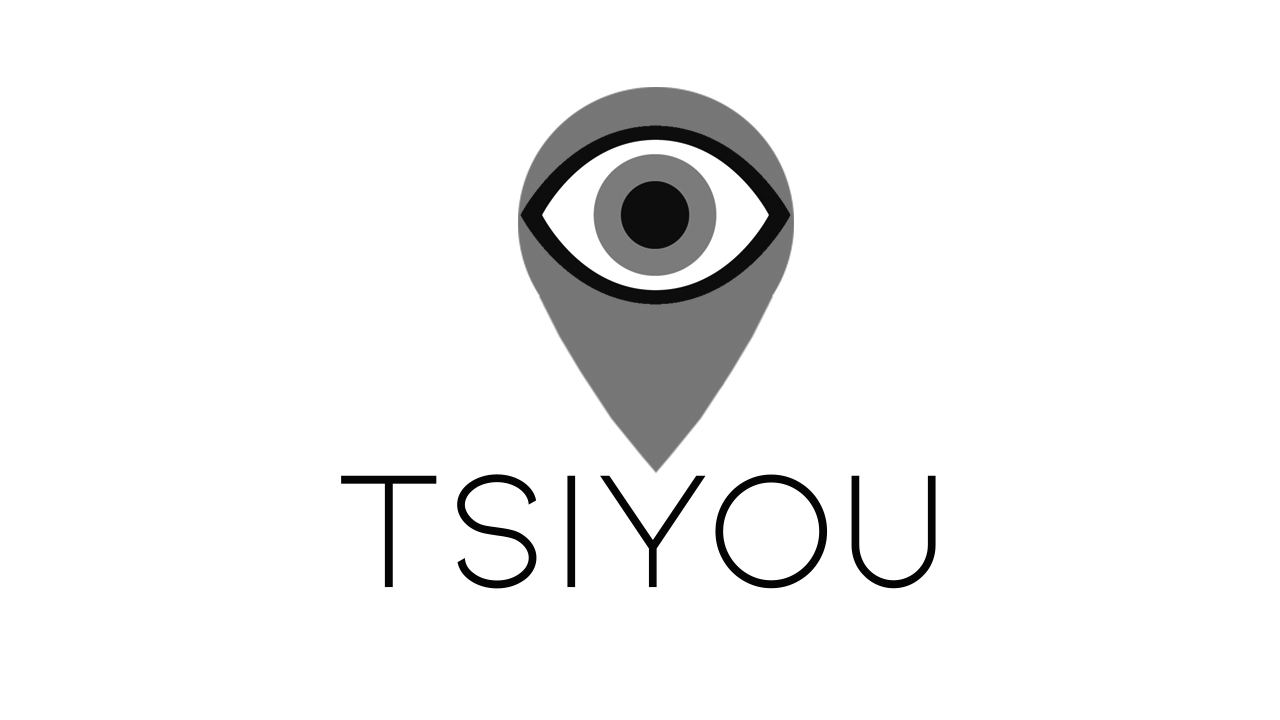
<style>
.page{position:relative;width:1280px;height:720px;background:#ffffff}
.page>*{position:absolute;margin:0}
.t1{font:171.1px "Kiona-Regular";color:#040404}
</style>
<div class="page">
<p class="t1" style="left:341px;top:474px;width:595px;height:115px">TsiYou</p>
</div>
